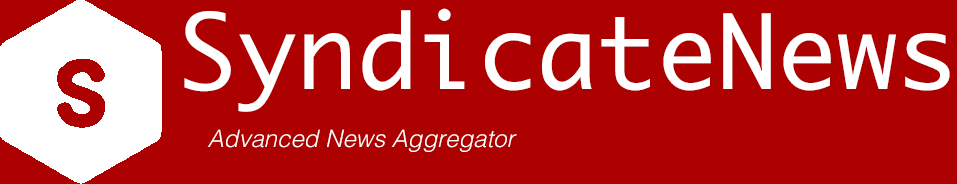
<style>
.page{position:relative;width:957px;height:184px;background:#ad0000}
.page>*{position:absolute;margin:0}
.t1{font:100px "Ayuthaya";color:#ffffff}
.t2{font:24px "Helvetica-LightOblique";color:#ffffff}
</style>
<div class="page">
<p class="t1" style="left:184px;top:8px;width:766px;height:104px">SyndicateNews</p>
<p class="t2" style="left:207px;top:129px;width:310px;height:23px">Advanced News Aggregator</p>
</div>
